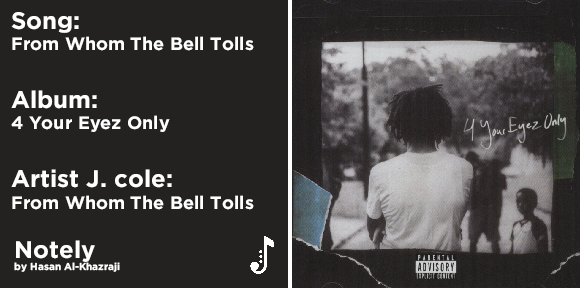
<style>
.page{position:relative;width:580px;height:288px;background:#232220}
.page>*{position:absolute;margin:0}
.t1{font:18px "Gotham-Bold";color:#ffffff}
.t2{font:24px "Gotham-Bold";color:#ffffff}
.t3{font:10px "Gotham-Bold";color:#ffffff}
</style>
<div class="page">
<p class="t1" style="left:11px;top:12px;width:243px;height:198px"><span class="t2">Song:<br></span>From Whom The Bell Tolls<br><span class="t2"><br>Album:<br></span>4 Your Eyez Only<br><span class="t2"><br>Artist J. cole:<br></span>From Whom The Bell Tolls</p>
<p class="t3" style="left:14px;top:240px;width:106px;height:32px"><span class="t2">Notely<br></span>by Hasan Al-Khazraji</p>
</div>
